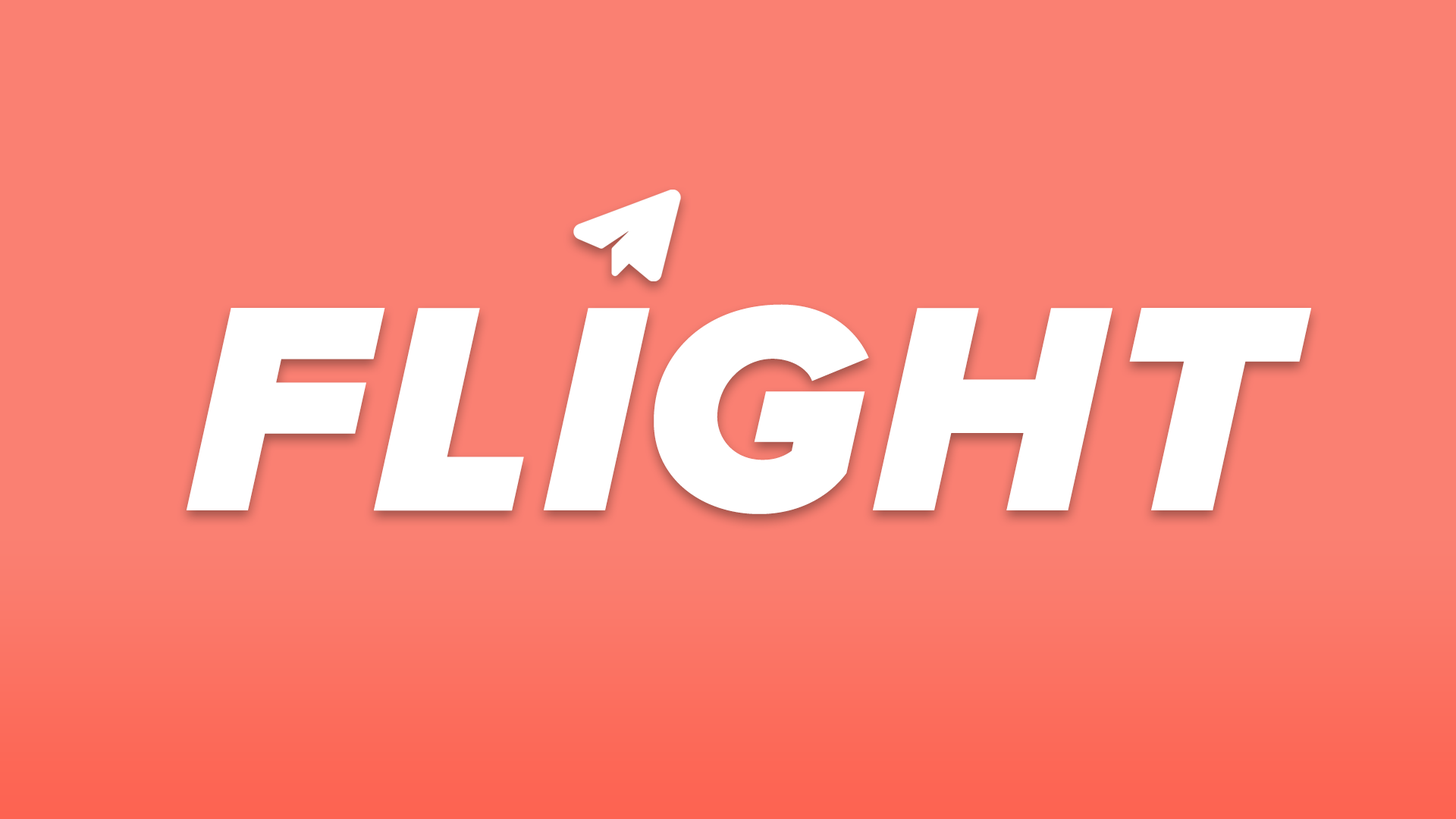
<style>
.page{position:relative;width:1456px;height:819px;background:#fa8072}
.page>*{position:absolute;margin:0}
.t1{font:303.3px "ProximaNova-BlackIt";letter-spacing:0.025em;color:#ffffff}
</style>
<div class="page">
<p class="t1" style="left:187px;top:304px;width:1124px;height:210px">FLIGHT</p>
</div>
